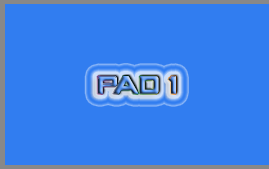
<style>
.page{position:relative;width:269px;height:169px;background:#317df0}
.page>*{position:absolute;margin:0}
.t1{font:30px "CRYSTALCORE"}
</style>
<div class="page">
<p class="t1" style="left:97px;top:76px;width:79px;height:18px">Pad 1</p>
</div>
